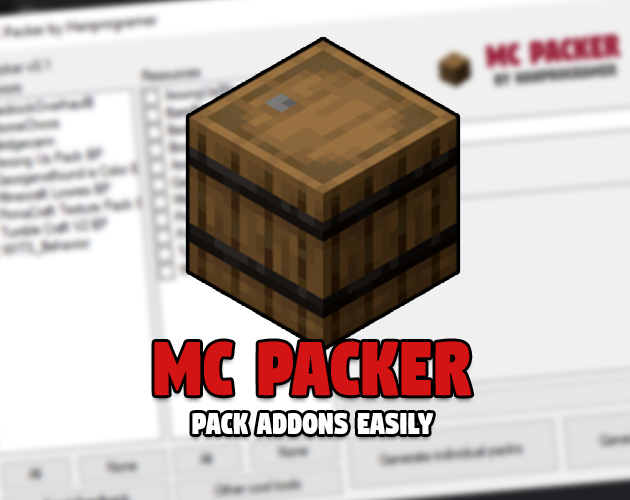
<style>
.page{position:relative;width:630px;height:500px}
.page>*{position:absolute;margin:0}
.t1{font:90.1px "Digitalt";color:#d41414;scale:0.83 1}
.t2{font:35.5px "Digitalt";color:#ffffff;scale:0.84 1}
</style>
<div class="page">
<p class="t1" style="left:154px;top:341px;width:318px;height:55px">MC PACKER</p>
<p class="t2" style="left:192px;top:413px;width:241px;height:21px">PACK ADDONS EASILY</p>
</div>
